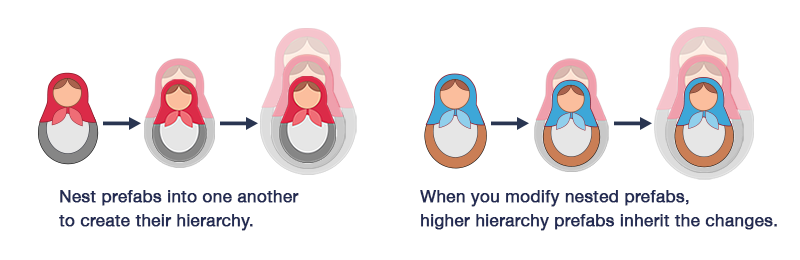
<style>
.page{position:relative;width:800px;height:260px;background:#ffffff}
.page>*{position:absolute;margin:0}
.t1{font:17px/24px "HelveticaNeue";color:#232b53;font-weight:bold}
</style>
<div class="page">
<p class="t1" style="left:59px;top:190px;width:240px;height:41px">Nest prefabs into one another <br>to create their hierarchy.</p>
<p class="t1" style="left:420px;top:190px;width:357px;height:41px">When you modify nested prefabs, <br>higher hierarchy prefabs inherit the changes.</p>
</div>
